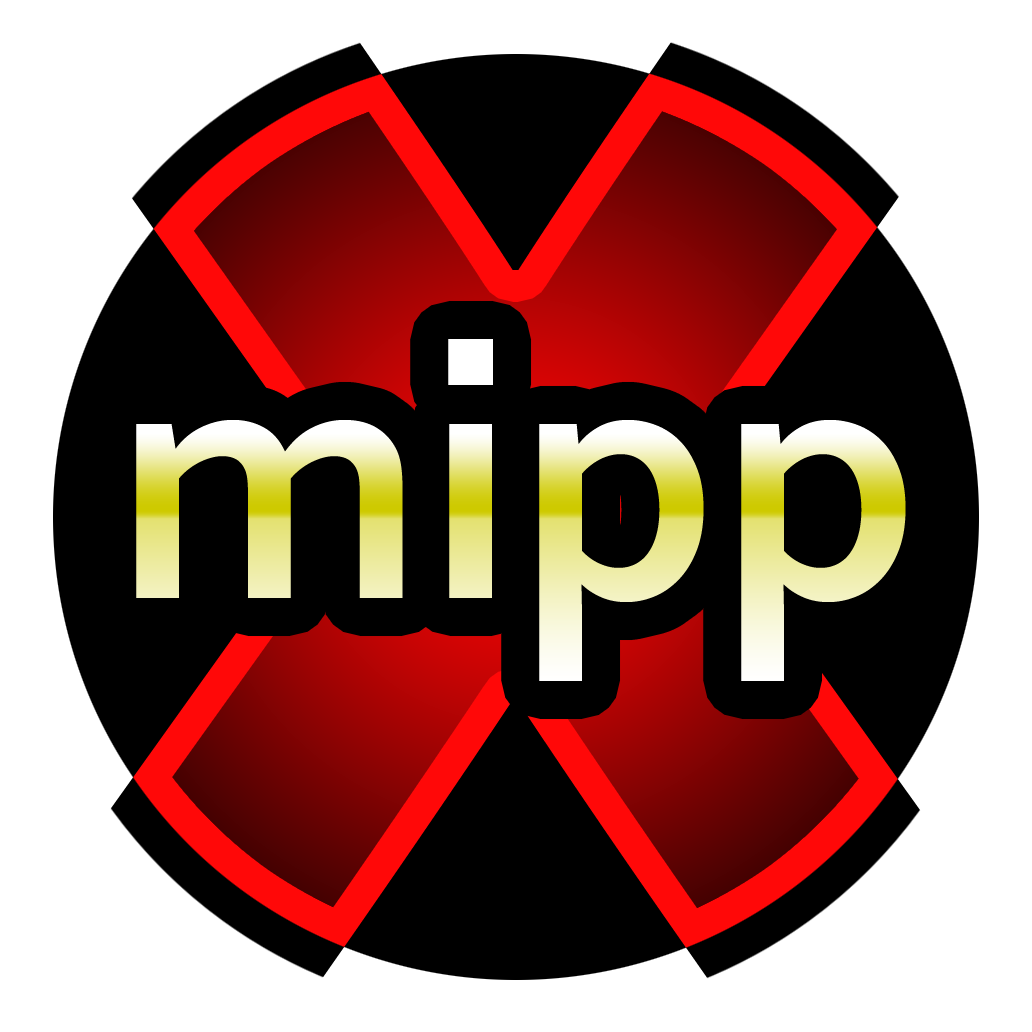
<style>
.page{position:relative;width:1032px;height:1032px;background:#ffffff}
.page>*{position:absolute;margin:0}
.t1{font:366.7px "Corbel-Bold"}
</style>
<div class="page">
<p class="t1" style="left:136px;top:339px;width:770px;height:342px">mipp</p>
</div>
